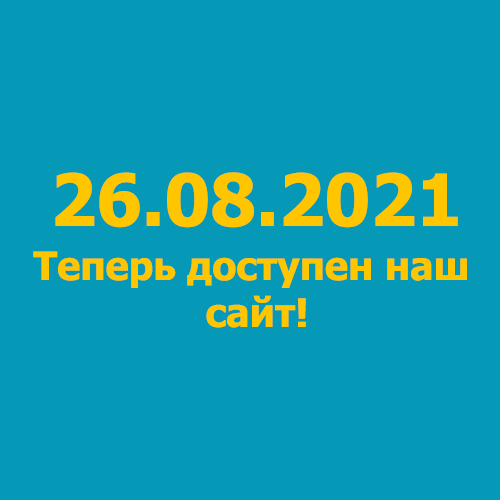
<style>
.page{position:relative;width:500px;height:500px;background:#0698b7}
.page>*{position:absolute;margin:0}
.t1{font:72px "Tahoma-Bold";color:#ffc600}
.t2{font:39px "Tahoma-Bold";color:#ffc600}
</style>
<div class="page">
<p class="t1" style="left:55px;top:172px;width:403px;height:56px">26.08.2021</p>
<p class="t2" style="left:33px;top:251px;width:434px;height:77px;text-align:center">Теперь доступен наш <br>сайт!</p>
</div>
